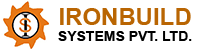
<style>
.page{position:relative;width:200px;height:50px;background:#ffffff}
.page>*{position:absolute;margin:0}
.t1{font:14px "Arial-BoldMT";color:#000000}
.t2{font:24px "Arial-BoldMT";color:#b96502}
</style>
<div class="page">
<p class="t1" style="left:58px;top:8px;width:134px;height:33px;text-align:center"><span class="t2">IRONBUILD<br></span>SYSTEMS PVT. LTD.</p>
</div>
